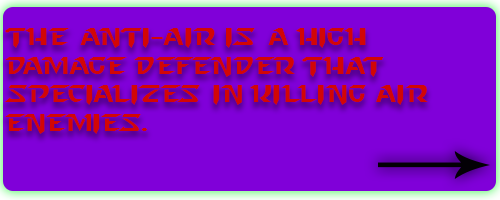
<style>
.page{position:relative;width:500px;height:200px;background:#8000d9}
.page>*{position:absolute;margin:0}
.t1{font:24px "StarcraftNormal";color:#d20606}
</style>
<div class="page">
<p class="t1" style="left:4px;top:28px;width:424px;height:106px">The anti-air is a high damage defender that <br>specializes in killing air <br>enemies.</p>
</div>
